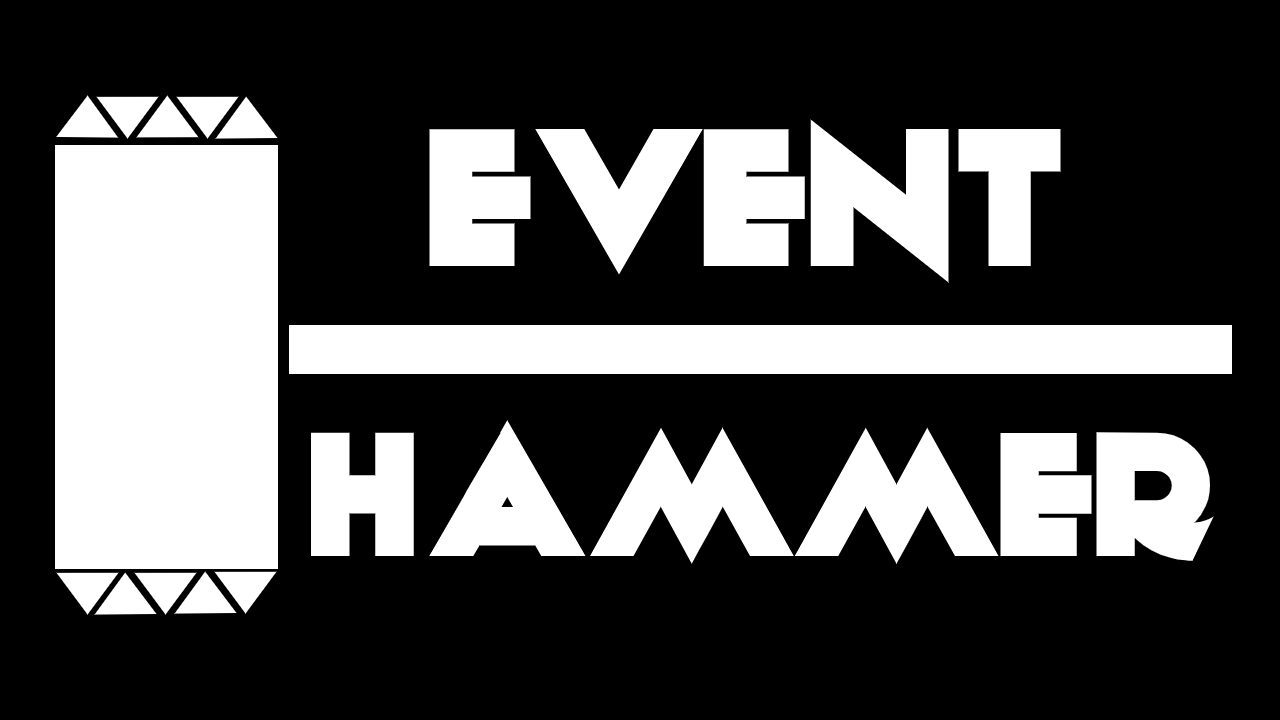
<style>
.page{position:relative;width:1280px;height:720px;background:#000000}
.page>*{position:absolute;margin:0}
.t1{font:200px "Anagram";color:#ffffff}
.t2{font:180px "Anagram";color:#ffffff}
</style>
<div class="page">
<p class="t1" style="left:429px;top:119px;width:632px;height:164px">Event</p>
<p class="t2" style="left:311px;top:420px;width:903px;height:144px">HAMMER</p>
</div>
